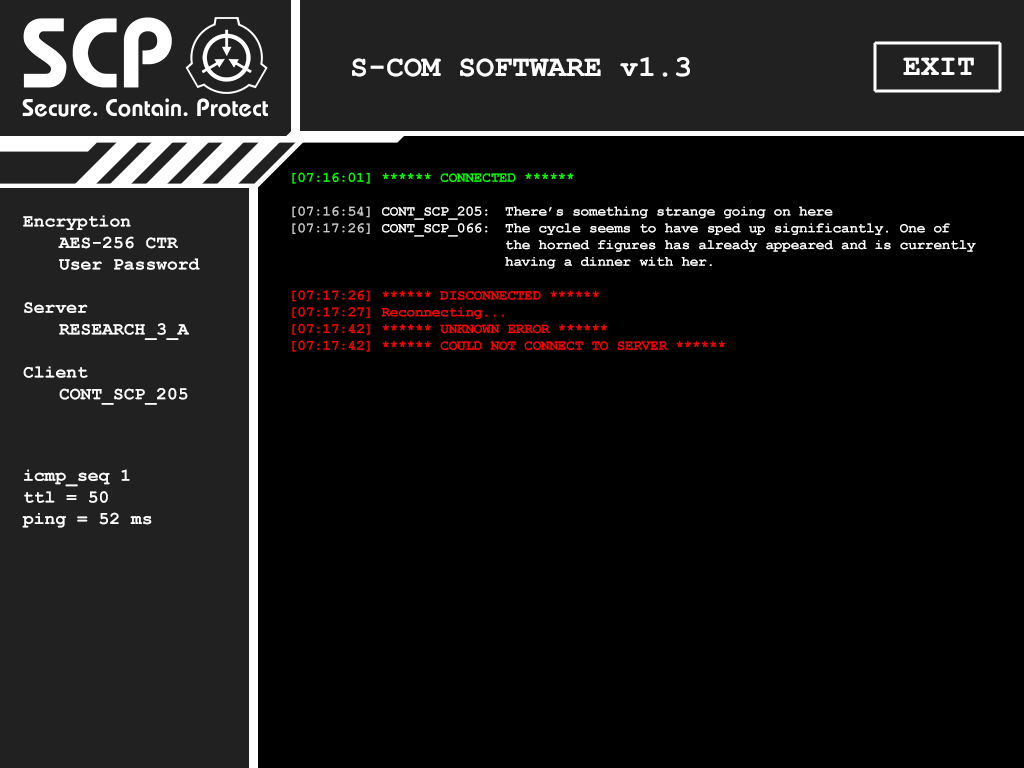
<style>
.page{position:relative;width:1024px;height:768px;background:#000000}
.page>*{position:absolute;margin:0}
.t1{font:30px "CourierNewPS-BoldMT";color:#ffffff}
.t2{font:14px "CourierNewPS-BoldMT";color:#ffffff}
.t3{font:14px "CourierNewPS-BoldMT";color:#00ff00}
.t4{font:14px "CourierNewPS-BoldMT";color:#c8c8c8}
.t5{font:14px "CourierNewPS-BoldMT";color:#ff0000}
.t6{font:18px "CourierNewPS-BoldMT";color:#ffffff}
</style>
<div class="page">
<p class="t1" style="left:352px;top:57px;width:338px;height:20px">S-COM SOFTWARE v1.3</p>
<p class="t1" style="left:903px;top:57px;width:71px;height:18px">EXIT</p>
<p class="t2" style="left:292px;top:172px;width:684px;height:180px"><span class="t3">[07:16:01] ****** CONNECTED ******<br><br></span><span class="t4">[07:16:54]</span> CONT_SCP_205:  There’s something strange going on here<br><span class="t4">[07:17:26]</span> CONT_SCP_066:  The cycle seems to have sped up significantly. One of         the horned figures has already appeared and is currently        having a dinner with her.<br><br><span class="t5">[07:17:26] ****** DISCONNECTED ******<br>[07:17:27] Reconnecting...<br>[07:17:42] ****** UNKNOWN ERROR ******<br>[07:17:42] ****** COULD NOT CONNECT TO SERVER ******</span></p>
<p class="t6" style="left:22px;top:215px;width:178px;height:313px">Encryption <br> AES-256 CTR<br> User Password<br><br>Server<br> RESEARCH_3_A<br><br>Client<br> CONT_SCP_205<br><br><br><br>icmp_seq 1 <br>ttl = 50 <br>ping = 52 ms</p>
</div>
